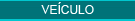
<style>
.page{position:relative;width:135px;height:21px;background:#007278}
.page>*{position:absolute;margin:0}
.t1{font:12px "ArialMT";color:#ffffff}
</style>
<div class="page">
<p class="t1" style="left:41px;top:2px;width:53px;height:12px">VEÍCULO</p>
</div>
